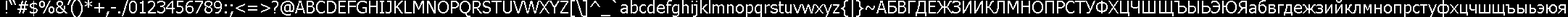
<style>
.page{position:relative;width:1568px;height:17px;background:#000000}
.page>*{position:absolute;margin:0}
.t1{font:17.4px "Tahoma";color:#ffffff}
</style>
<div class="page">
<p class="t1" style="left:6px;top:0px;width:1560px;height:17px">!“#$%&amp;’()*+,-./0123456789:;&lt;=&gt;?@ABCDEFGHIJKLMNOPQRSTUVWXYZ[\]^_`abcdefghijklmnopqrstuvwxyz{|}~АБВГДЕЖЗИЙКЛМНОПРСТУФХЦЧШЩЪЫЬЭЮЯабвгдежзийклмнопрстуфхцчшщъыьэюя</p>
</div>
